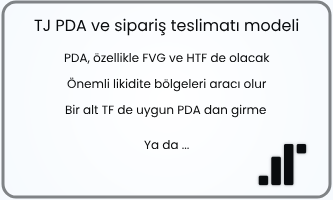
<style>
.page{position:relative;width:333px;height:200px}
.page>*{position:absolute;margin:0}
.t1{font:16px "Poppins-Regular";color:#000000}
.t2{font:12px "Poppins-Regular";color:#0c0d0f}
.t3{font:12px "Poppins-Regular";color:#0f1011}
.t4{font:12px "Poppins-Regular";color:#0e0f10}
.t5{font:12px "Poppins-Regular";color:#000000}
</style>
<div class="page">
<p class="t1" style="left:34px;top:18px;width:265px;height:18px">TJ PDA ve sipariş teslimatı modeli</p>
<p class="t2" style="left:64px;top:52px;width:206px;height:12px">PDA, özellikle FVG ve HTF de olacak</p>
<p class="t3" style="left:67px;top:77px;width:200px;height:15px">Önemli likidite bölgeleri aracı olur</p>
<p class="t4" style="left:65px;top:104px;width:201px;height:14px">Bir alt TF de uygun PDA dan girme</p>
<p class="t5" style="left:144px;top:140px;width:45px;height:9px">Ya da ...</p>
</div>
